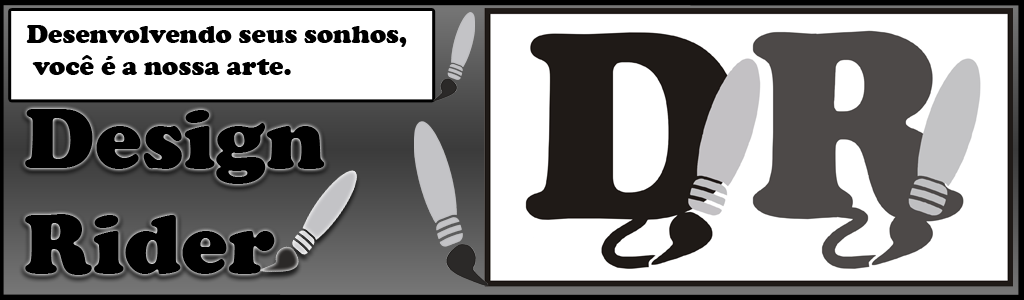
<style>
.page{position:relative;width:1024px;height:300px;background:#ffffff}
.page>*{position:absolute;margin:0}
.t1{font:26.1px "CooperBlack";color:#000000;scale:1.04 1}
.t2{font:87.3px "CooperBlack";color:#000000}
</style>
<div class="page">
<p class="t1" style="left:26px;top:25px;width:381px;height:50px">Desenvolvendo seus sonhos,<br> você é a nossa arte.</p>
<p class="t2" style="left:25px;top:109px;width:300px;height:166px">Design<br>Rider</p>
</div>
